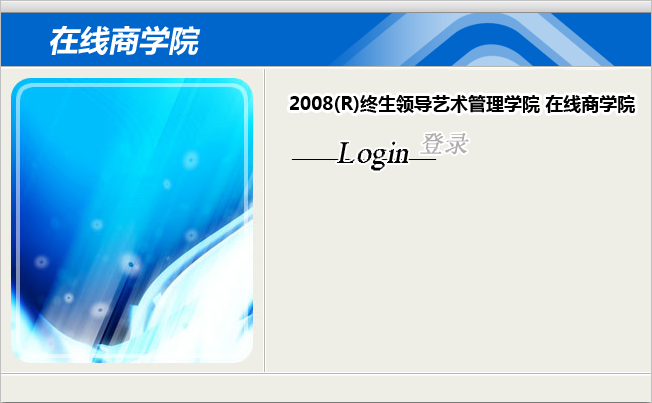
<style>
.page{position:relative;width:652px;height:403px;background:#eeeee6}
.page>*{position:absolute;margin:0}
.t1{font:30px "MicrosoftYaHei";color:#ffffff;font-style:italic}
.t2{font:18px "MicrosoftYaHei";color:#000000}
.t3{font:24px "System";color:#b1adad;font-style:italic}
.t4{font:30px "MS Serif";color:#000000;font-style:italic}
</style>
<div class="page">
<p class="t1" style="left:50px;top:25px;width:151px;height:31px">在线商学院</p>
<p class="t2" style="left:289px;top:95px;width:346px;height:20px">2008(R)终生领导艺术管理学院 在线商学院</p>
<p class="t3" style="left:420px;top:133px;width:49px;height:22px">登录</p>
<p class="t4" style="left:337px;top:141px;width:72px;height:30px">Login</p>
</div>
